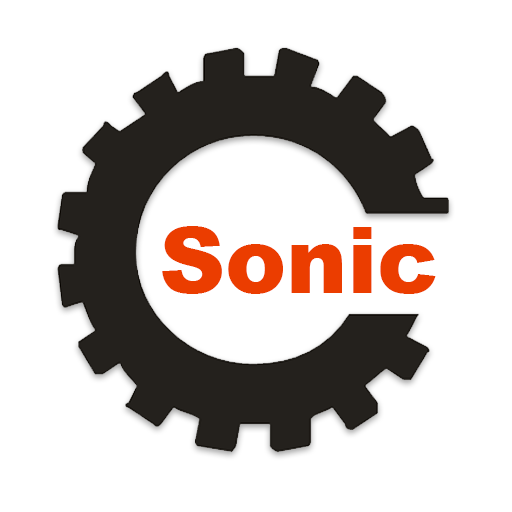
<style>
.page{position:relative;width:512px;height:512px;background:#ffffff}
.page>*{position:absolute;margin:0}
.t1{font:91.5px "Arial-Black";color:#eb3d00}
</style>
<div class="page">
<p class="t1" style="left:162px;top:226px;width:274px;height:68px">Sonic</p>
</div>
